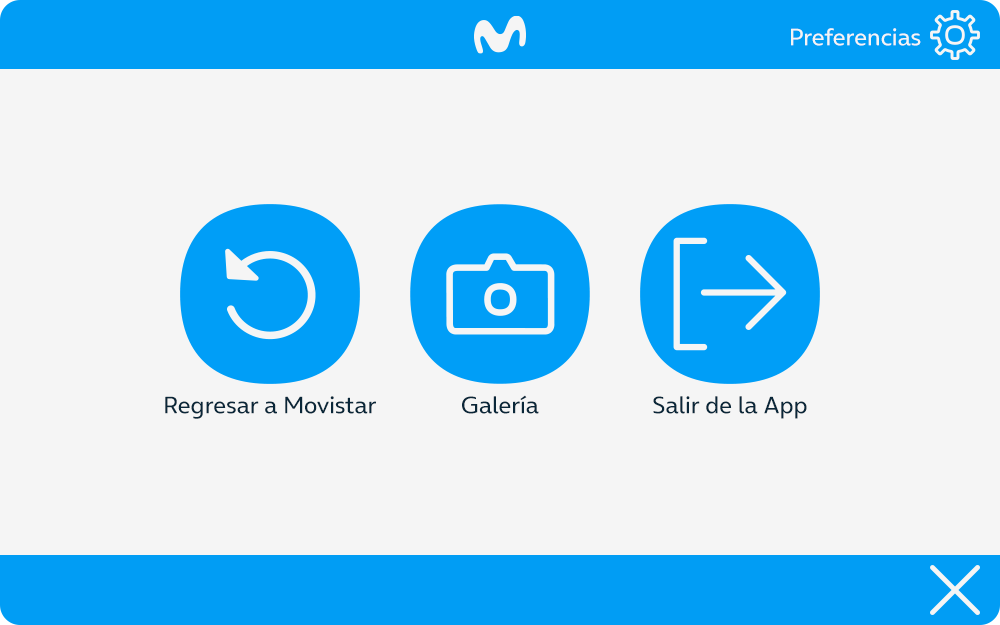
<style>
.page{position:relative;width:1000px;height:625px;background:#f5f5f5}
.page>*{position:absolute;margin:0}
.t1{font:24px "OnAir-Regular";color:#f5f5f5}
.t2{font:24px "OnAir-Regular";color:#0a2739}
</style>
<div class="page">
<p class="t1" style="left:791px;top:28px;width:130px;height:18px">Preferencias</p>
<p class="t2" style="left:165px;top:396px;width:211px;height:23px">Regresar a Movistar</p>
<p class="t2" style="left:462px;top:395px;width:77px;height:19px">Galería</p>
<p class="t2" style="left:653px;top:396px;width:154px;height:23px">Salir de la App</p>
</div>
